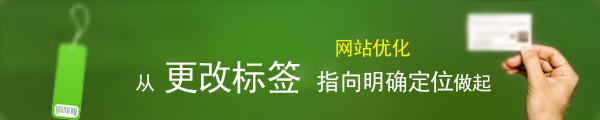
<style>
.page{position:relative;width:600px;height:120px}
.page>*{position:absolute;margin:0}
.t1{font:20px "SimHei";letter-spacing:-0.05em;color:#fff100}
.t2{font:24px "SimHei";letter-spacing:-0.05em;color:#ffffff}
.t3{font:20px "SimHei";letter-spacing:-0.05em;color:#ffffff}
.t4{font:36px "SimHei";letter-spacing:-0.05em;color:#ffffff}
</style>
<div class="page">
<p class="t1" style="left:336px;top:39px;width:74px;height:18px">网站优化</p>
<p class="t2" style="left:135px;top:60px;width:356px;height:34px"><span class="t3">从 </span><span class="t4">更改标签 </span>指向明确定位<span class="t3">做起</span></p>
</div>
